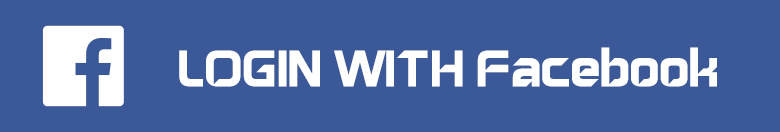
<style>
.page{position:relative;width:780px;height:132px;background:#3b5998}
.page>*{position:absolute;margin:0}
.t1{font:60px "GayatriRegular";color:#ffffff}
</style>
<div class="page">
<p class="t1" style="left:179px;top:47px;width:538px;height:40px">LOGIN WITH Facebook</p>
</div>
